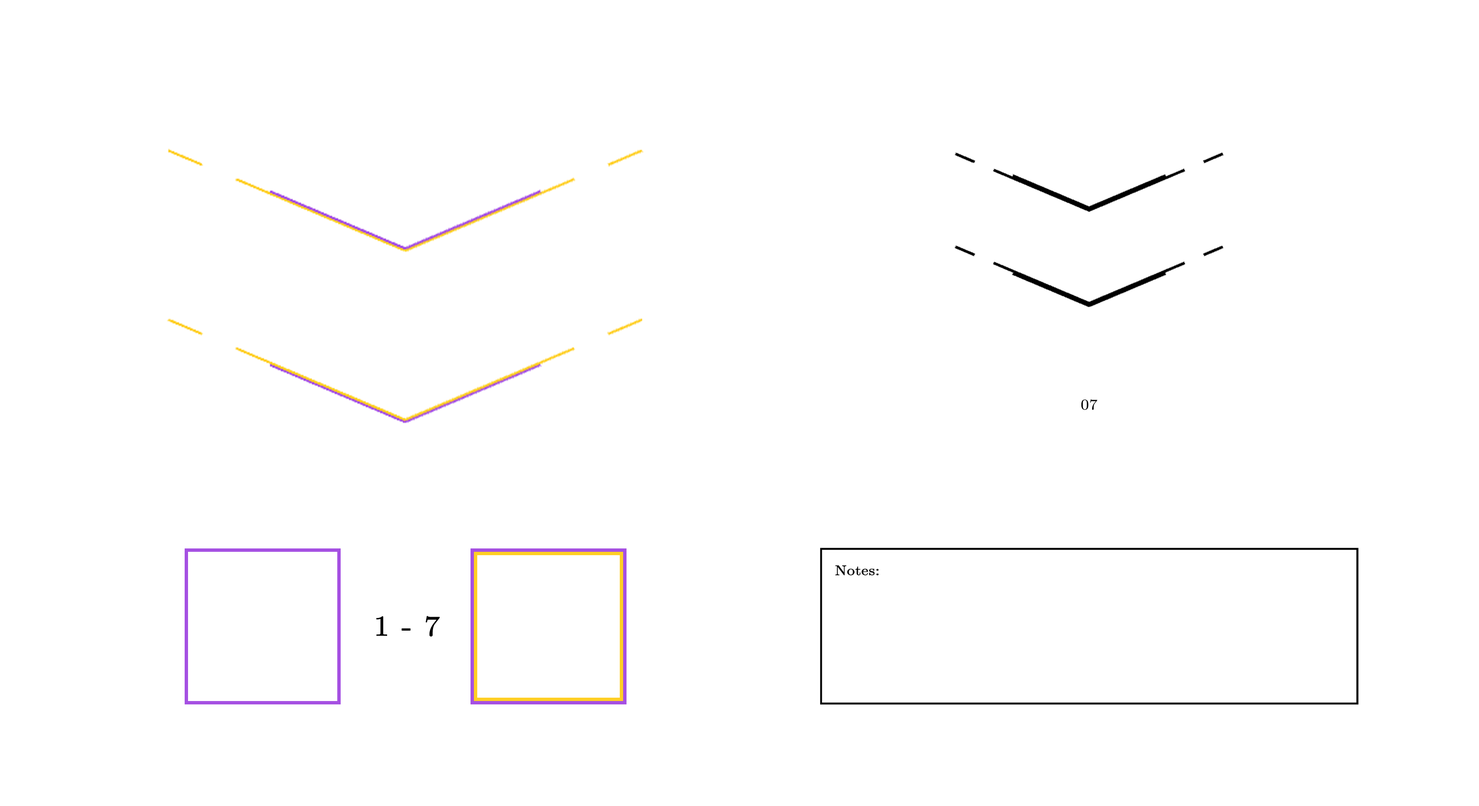
<style>
.page{position:relative;width:1479px;height:806px;background:#ffffff}
.page>*{position:absolute;margin:0}
.t1{font:14.7px "CMUSerif-Roman";color:#000000;font-weight:bold;scale:1.1 1}
.t2{font:28.6px "CMUSerif-Roman";color:#000000;font-weight:bold;scale:1.1 1}
</style>
<div class="page">
<p class="t1" style="left:1081px;top:399px;width:17px;height:11px">07</p>
<p class="t2" style="left:376px;top:616px;width:64px;height:21px">1 - 7</p>
</div>
